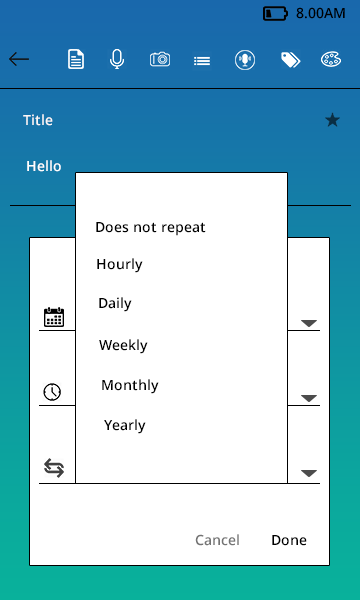
<style>
.page{position:relative;width:360px;height:600px;background:#ffffff}
.page>*{position:absolute;margin:0}
.t1{font:14px "OpenSans-Semibold";color:#000000}
.t2{font:14px "OpenSans-Semibold";color:#fbf8f8}
.t3{font:14px "OpenSans-Semibold";color:#ffffff}
.t4{font:14px "OpenSans-Semibold";color:#737373}
</style>
<div class="page">
<p class="t1" style="left:296px;top:7px;width:49px;height:12px">8.00AM</p>
<p class="t2" style="left:23px;top:114px;width:30px;height:12px">Title</p>
<p class="t3" style="left:27px;top:160px;width:34px;height:12px">Hello</p>
<p class="t1" style="left:96px;top:222px;width:110px;height:14px">Does not repeat</p>
<p class="t1" style="left:97px;top:258px;width:46px;height:15px">Hourly</p>
<p class="t1" style="left:99px;top:297px;width:33px;height:15px">Daily</p>
<p class="t1" style="left:99px;top:339px;width:49px;height:15px">Weekly</p>
<p class="t1" style="left:102px;top:379px;width:57px;height:15px">Monthly</p>
<p class="t1" style="left:104px;top:419px;width:42px;height:15px">Yearly</p>
<p class="t4" style="left:195px;top:534px;width:44px;height:12px">Cancel</p>
<p class="t1" style="left:272px;top:535px;width:35px;height:11px">Done</p>
</div>
